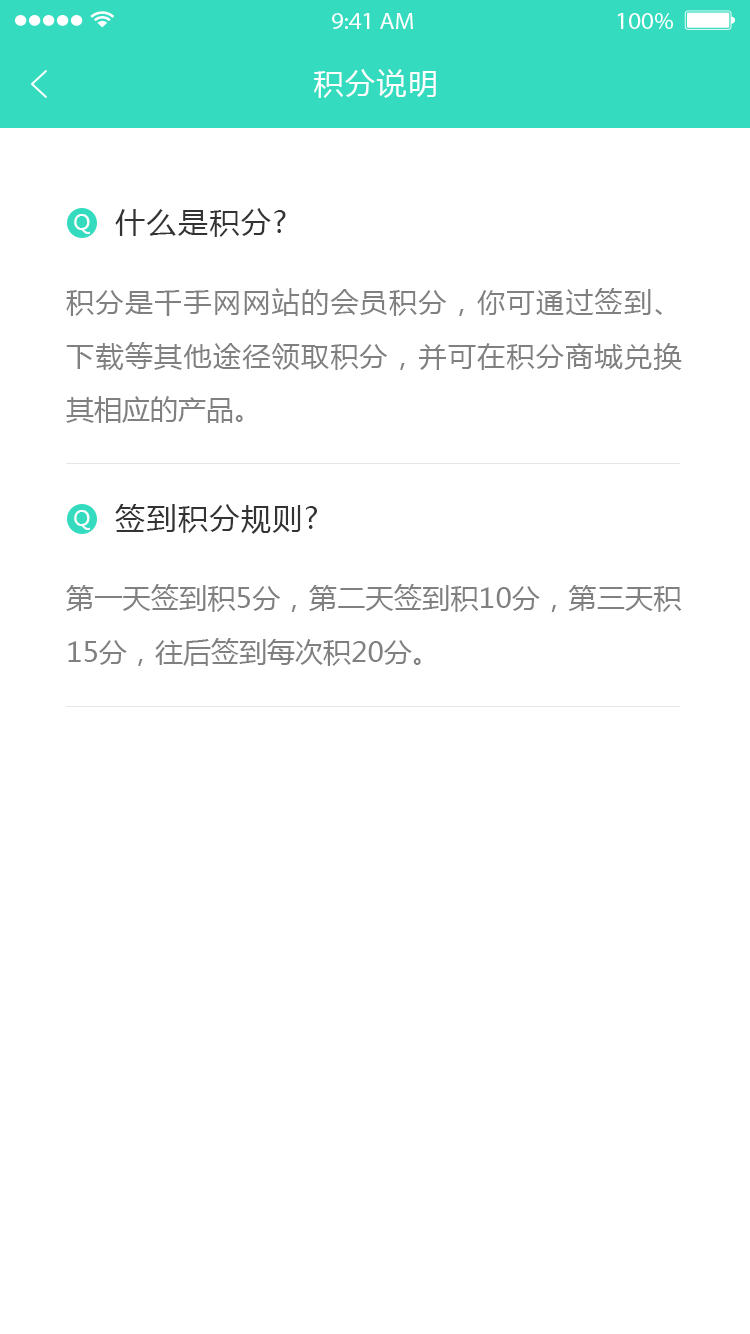
<style>
.page{position:relative;width:750px;height:1334px;background:#ffffff}
.page>*{position:absolute;margin:0}
.t1{font:30px "MicrosoftYaHei";letter-spacing:0.05em;color:#ffffff}
.t2{font:30px "MicrosoftYaHei";letter-spacing:0.05em;color:#333333}
.t3{font:20.8px "MicrosoftYaHei";letter-spacing:0.05em;color:#ffffff}
.t4{font:28px/53.3px "MicrosoftYaHei";color:#808080}
</style>
<div class="page">
<p class="t1" style="left:314px;top:69px;width:122px;height:29px">积分说明</p>
<p class="t2" style="left:115px;top:208px;width:171px;height:29px">什么是积分?</p>
<p class="t3" style="left:74px;top:214px;width:16px;height:20px">Q</p>
<p class="t4" style="left:66px;top:288px;width:616px;height:135px;text-align:justify">积分是千手网网站的会员积分，你可通过签到、下载等其他途径领取积分，并可在积分商城兑换其相应的产品。</p>
<p class="t3" style="left:74px;top:510px;width:16px;height:20px">Q</p>
<p class="t2" style="left:115px;top:504px;width:202px;height:30px">签到积分规则?</p>
<p class="t4" style="left:66px;top:584px;width:616px;height:82px;text-align:justify">第一天签到积5分，第二天签到积10分，第三天积15分，往后签到每次积20分。</p>
</div>
